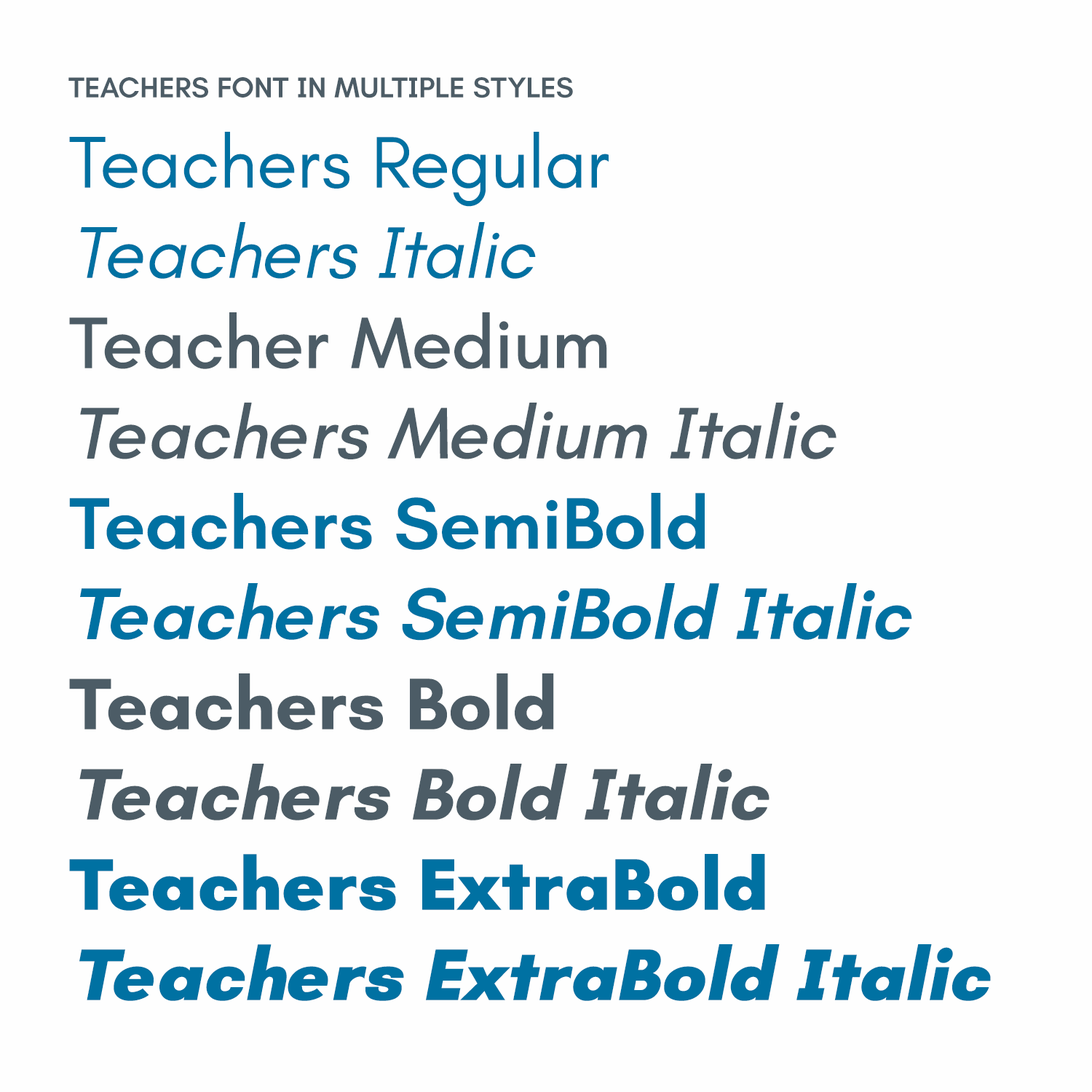
<style>
.page{position:relative;width:1092px;height:1092px;background:#fefefe}
.page>*{position:absolute;margin:0}
.t1{font:29.1px/61.2px "Teachers-SemiBold";color:#4c5c66;text-transform:uppercase}
.t2{font:74.3px/90.3px "Teachers-Regular";color:#0071a2}
.t3{font:74.3px/90.3px "Teachers-Italic";color:#0071a2}
.t4{font:74.3px/90.3px "Teachers-Medium";color:#4c5c66}
.t5{font:74.3px/90.3px "Teachers-MediumItalic";color:#4c5c66}
.t6{font:74.3px/90.3px "Teachers-SemiBold";color:#0071a2}
.t7{font:74.3px/90.3px "Teachers-SemiBoldItalic";color:#0071a2}
.t8{font:74.3px/90.3px "Teachers-Bold";color:#4c5c66}
.t9{font:74.3px/90.3px "Teachers-BoldItalic";color:#4c5c66}
.t10{font:74.3px/90.3px "Teachers-ExtraBold";color:#0071a2}
.t11{font:74.3px/90.3px "Teachers-ExtraBoldItalic";color:#0071a2}
</style>
<div class="page">
<p class="t1" style="left:68px;top:77px;width:923px;height:924px">Teachers Font in Multiple Styles<br><span class="t2">Teachers Regular </span><span class="t3"><br>Teachers Italic<br></span><span class="t4">Teacher Medium </span><span class="t5"><br>Teachers Medium Italic<br></span><span class="t6">Teachers SemiBold</span><span class="t7"> <br>Teachers SemiBold Italic<br></span><span class="t8">Teachers Bold </span><span class="t9"><br>Teachers Bold Italic<br></span><span class="t10">Teachers ExtraBold </span><span class="t11"><br>Teachers ExtraBold Italic</span></p>
</div>
